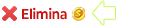
<style>
.page{position:relative;width:143px;height:26px;background:#ffffff}
.page>*{position:absolute;margin:0}
.t1{font:14.3px "Montserrat-Bold";letter-spacing:-0.04em;color:#ca1414;scale:0.88 1}
</style>
<div class="page">
<p class="t1" style="left:22px;top:7px;width:45px;height:13px">Elimina</p>
</div>
